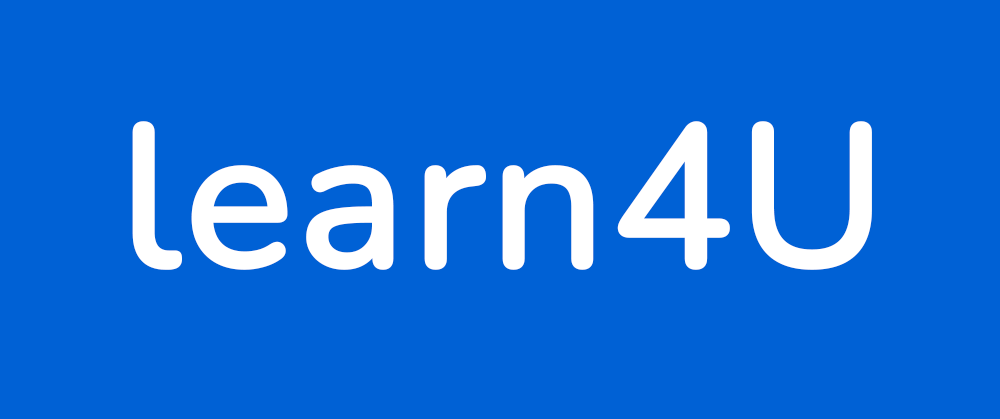
<style>
.page{position:relative;width:1000px;height:419px;background:#0061d5}
.page>*{position:absolute;margin:0}
.t1{font:200px "Nunito-Regular";color:#ffffff;font-weight:bold}
</style>
<div class="page">
<p class="t1" style="left:132px;top:121px;width:740px;height:149px">learn4U</p>
</div>
